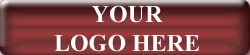
<style>
.page{position:relative;width:250px;height:55px}
.page>*{position:absolute;margin:0}
.t1{font:24px "TimesNewRomanPS-BoldMT";color:#ffffff}
</style>
<div class="page">
<p class="t1" style="left:54px;top:5px;width:145px;height:47px;text-align:center">YOUR<br>LOGO HERE</p>
</div>
